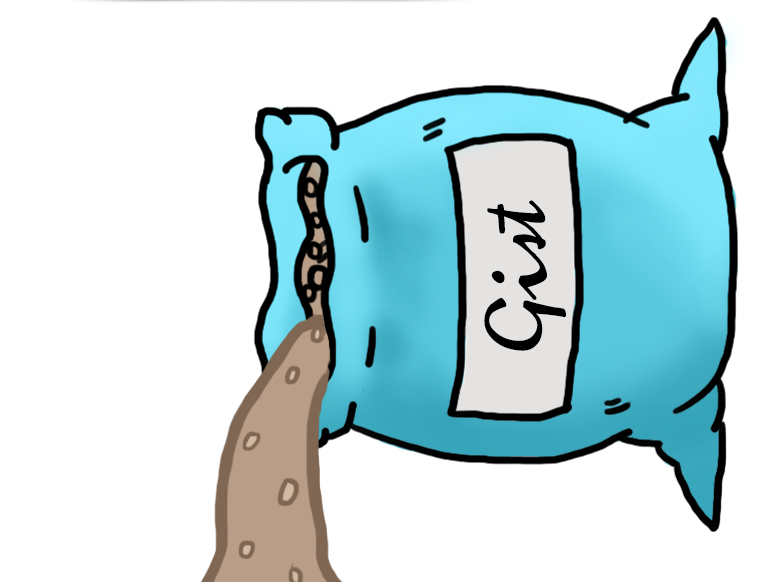
<style>
.page{position:relative;width:770px;height:582px;background:#ffffff}
.page>*{position:absolute;margin:0}
.t1{font:79.2px "Borealis";color:#000000}
</style>
<div class="page">
<p class="t1" style="left:484px;top:200px;width:82px;height:151px;rotate:-90deg">Gist</p>
</div>
